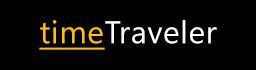
<style>
.page{position:relative;width:256px;height:70px;background:#000000}
.page>*{position:absolute;margin:0}
.t1{font:31.4px "SegoeUI";letter-spacing:0.025em;color:#ffffff}
.t2{font:31.4px "SegoeUI";letter-spacing:0.025em;color:#ffc000;text-decoration:underline}
</style>
<div class="page">
<p class="t1" style="left:39px;top:20px;width:178px;height:30px"><span class="t2">time</span>Traveler</p>
</div>
